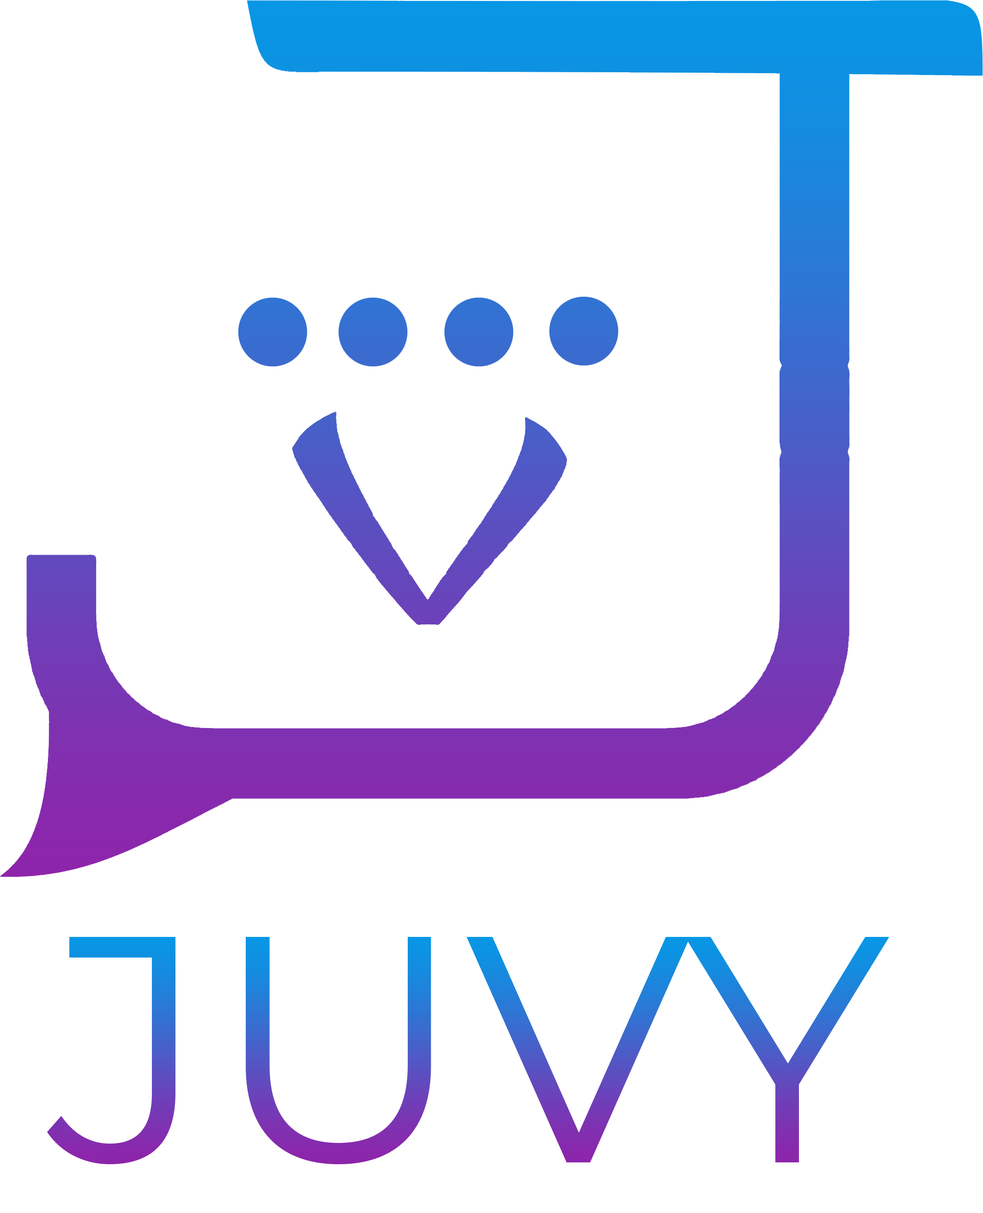
<style>
.page{position:relative;width:983px;height:1213px;background:#ffffff}
.page>*{position:absolute;margin:0}
.t1{font:322.4px "Montserrat-Regular"}
</style>
<div class="page">
<p class="t1" style="left:47px;top:937px;width:843px;height:227px">JUVY</p>
</div>
